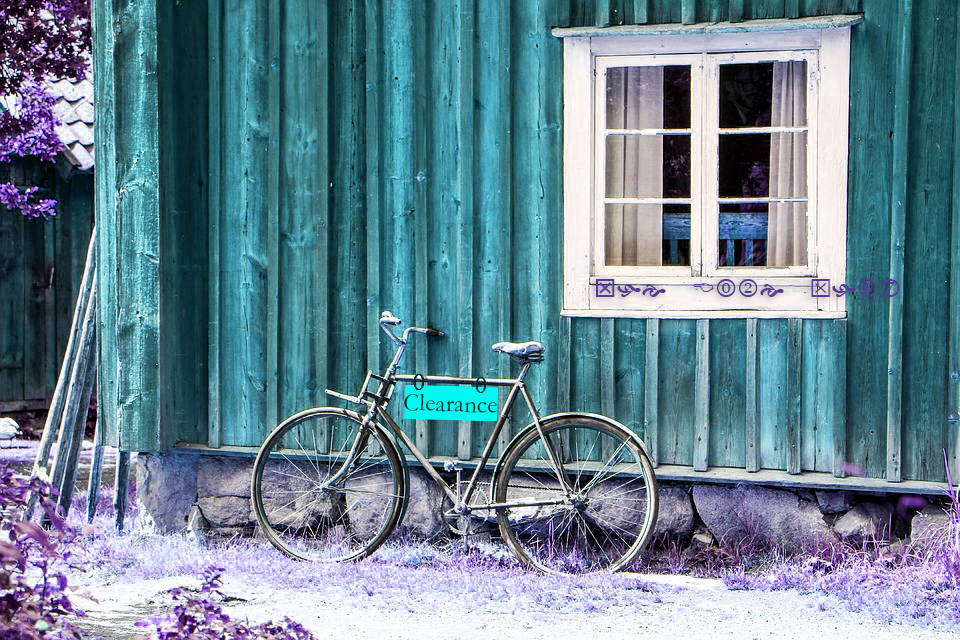
<style>
.page{position:relative;width:960px;height:640px}
.page>*{position:absolute;margin:0}
.t1{font:25px "Garamond";color:#04312f}
</style>
<div class="page">
<p class="t1" style="left:404px;top:393px;width:93px;height:20px;rotate:2deg">Clearance</p>
</div>
